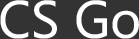
<style>
.page{position:relative;width:139px;height:39px;background:#333333}
.page>*{position:absolute;margin:0}
.t1{font:49.2px "MicrosoftYaHei";color:#ffffff}
</style>
<div class="page">
<p class="t1" style="left:0px;top:0px;width:139px;height:39px">CS Go</p>
</div>
